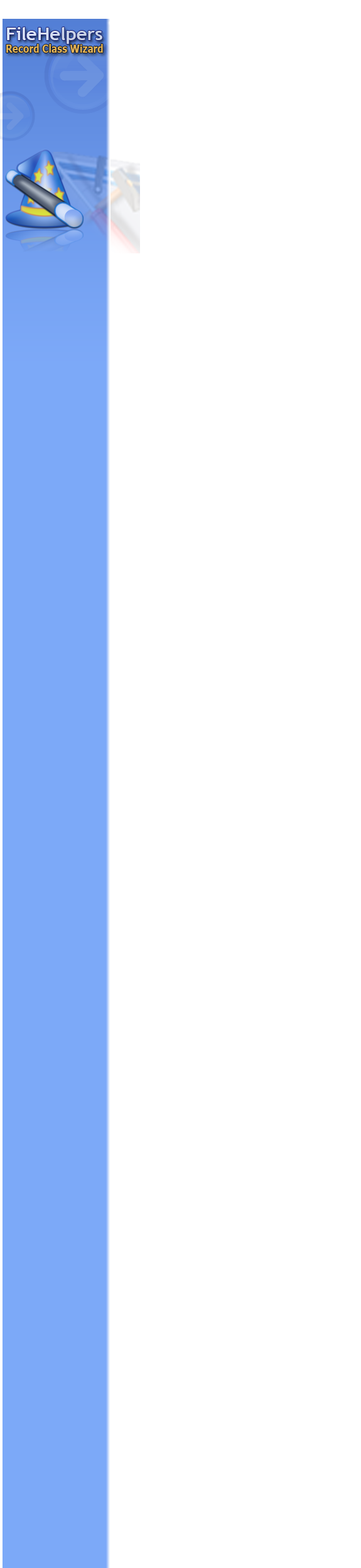
<style>
.page{position:relative;width:361px;height:1568px;background:#ffffff}
.page>*{position:absolute;margin:0}
.t1{font:17.6px "TrebuchetMS-Bold";color:#d4def0;scale:1.08 1}
.t2{font:11.2px "Tahoma-Bold";color:#e4b354;scale:0.86 1}
</style>
<div class="page">
<p class="t1" style="left:7px;top:27px;width:95px;height:17px">FileHelpers</p>
<p class="t2" style="left:6px;top:44px;width:97px;height:9px">Record Class Wizard</p>
</div>
